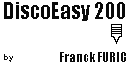
<style>
.page{position:relative;width:128px;height:64px;background:#ffffff}
.page>*{position:absolute;margin:0}
.t1{font:20.8px "Impact";color:#0a0a0a}
.t2{font:8.3px "MyriadPro-Bold";color:#0a0a0a}
.t3{font:12.5px "Impact";color:#0a0a0a}
</style>
<div class="page">
<p class="t1" style="left:4px;top:2px;width:121px;height:19px">DiscoEasy 200</p>
<p class="t2" style="left:4px;top:54px;width:9px;height:8px">by</p>
<p class="t3" style="left:60px;top:52px;width:66px;height:10px">Franck FURIC</p>
</div>
